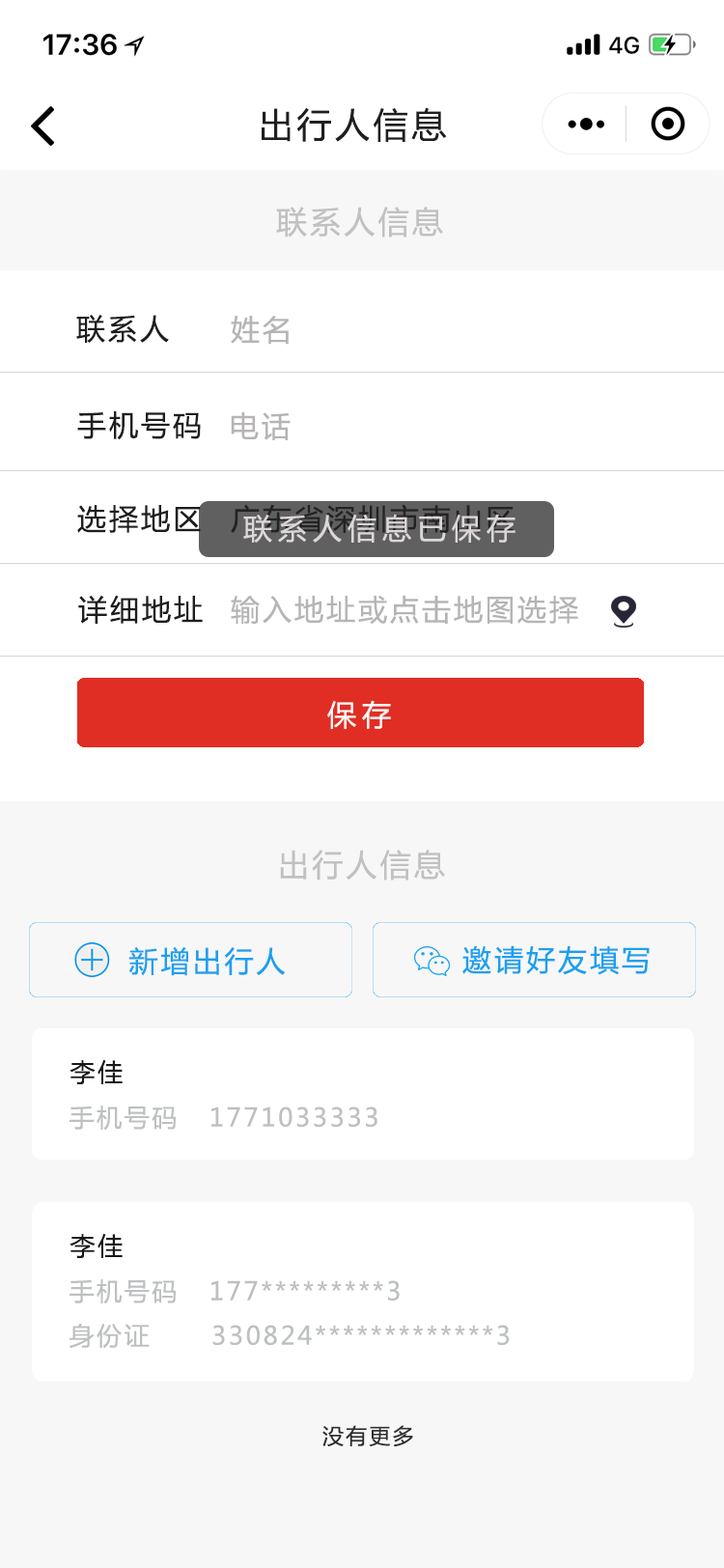
<style>
.page{position:relative;width:724px;height:1568px;background:#ffffff}
.page>*{position:absolute;margin:0}
.t1{font:34.8px "MicrosoftYaHei";letter-spacing:0.1em;color:#201f20}
.t2{font:30.9px "MicrosoftYaHei";letter-spacing:0.1em;color:#c1c1c1}
.t3{font:29px "MicrosoftYaHei";letter-spacing:0.1em;color:#1f1e1e}
.t4{font:29px "MicrosoftYaHei";letter-spacing:0.1em;color:#b6b4b4}
.t5{font:29px "MicrosoftYaHei";letter-spacing:0.1em;color:#242323}
.t6{font:29px "MicrosoftYaHei";letter-spacing:0.2em;color:#ddd8d8}
.t7{font:29px "MicrosoftYaHei";letter-spacing:0.2em;color:#fcf8f8}
.t8{font:29px "MicrosoftYaHei";letter-spacing:0.1em;color:#1ba0f0}
.t9{font:25.1px "MicrosoftYaHei";letter-spacing:0.1em;color:#181818}
.t10{font:25.1px "MicrosoftYaHei";letter-spacing:0.1em;color:#bdc0c1}
.t11{font:21.2px "MicrosoftYaHei";letter-spacing:0.1em;color:#2d2e2e}
</style>
<div class="page">
<p class="t1" style="left:262px;top:107px;width:185px;height:35px">出行人信息</p>
<p class="t2" style="left:276px;top:207px;width:167px;height:31px">联系人信息</p>
<p class="t3" style="left:76px;top:315px;width:93px;height:28px">联系人</p>
<p class="t4" style="left:231px;top:316px;width:58px;height:29px">姓名</p>
<p class="t3" style="left:77px;top:411px;width:124px;height:29px">手机号码</p>
<p class="t4" style="left:231px;top:412px;width:60px;height:28px">电话</p>
<p class="t3" style="left:77px;top:505px;width:124px;height:28px">选择地区</p>
<p class="t5" style="left:231px;top:504px;width:283px;height:30px">广东省深圳市南山区</p>
<p class="t6" style="left:243px;top:514px;width:273px;height:29px">联系人信息已保存</p>
<p class="t3" style="left:78px;top:595px;width:125px;height:29px">详细地址</p>
<p class="t4" style="left:231px;top:595px;width:347px;height:30px">输入地址或点击地图选择</p>
<p class="t7" style="left:327px;top:700px;width:64px;height:29px">保存</p>
<p class="t2" style="left:280px;top:850px;width:165px;height:31px">出行人信息</p>
<p class="t8" style="left:128px;top:947px;width:158px;height:29px">新增出行人</p>
<p class="t8" style="left:462px;top:945px;width:188px;height:30px">邀请好友填写</p>
<p class="t9" style="left:70px;top:1059px;width:53px;height:25px">李佳</p>
<p class="t10" style="left:70px;top:1106px;width:308px;height:25px">手机号码   1771033333</p>
<p class="t9" style="left:70px;top:1233px;width:53px;height:25px">李佳</p>
<p class="t10" style="left:70px;top:1279px;width:330px;height:25px">手机号码   177*********3</p>
<p class="t10" style="left:70px;top:1323px;width:440px;height:26px">身份证      330824*************3</p>
<p class="t11" style="left:322px;top:1425px;width:91px;height:22px">没有更多</p>
</div>
